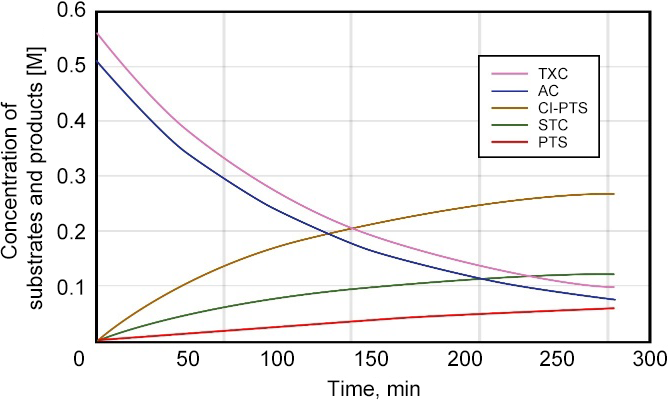
<style>
.page{position:relative;width:668px;height:400px;background:#ffffff}
.page>*{position:absolute;margin:0}
.t1{font:21.4px "ArialMT";color:#000000}
.t2{font:15.3px "ArialMT";color:#000000}
</style>
<div class="page">
<p class="t1" style="left:57px;top:1px;width:29px;height:294px;text-align:right">0.6<br>0.5<br>0.4<br>0.3<br>0.2<br>0.1</p>
<p class="t1" style="left:0px;top:47px;width:47px;height:263px;text-align:center;rotate:-90deg">Concentration of <br>substrates and products [M]</p>
<p class="t2" style="left:538px;top:67px;width:50px;height:81px">TXC<br>AC<br>CI-PTS<br>STC<br>PTS</p>
<p class="t1" style="left:74px;top:350px;width:10px;height:17px">0</p>
<p class="t1" style="left:177px;top:350px;width:22px;height:17px">50</p>
<p class="t1" style="left:261px;top:350px;width:33px;height:17px">100</p>
<p class="t1" style="left:355px;top:350px;width:33px;height:17px">150</p>
<p class="t1" style="left:448px;top:350px;width:34px;height:17px">200</p>
<p class="t1" style="left:540px;top:350px;width:34px;height:17px">250</p>
<p class="t1" style="left:633px;top:350px;width:34px;height:17px">300</p>
<p class="t1" style="left:327px;top:380px;width:93px;height:20px">Time, min</p>
</div>
